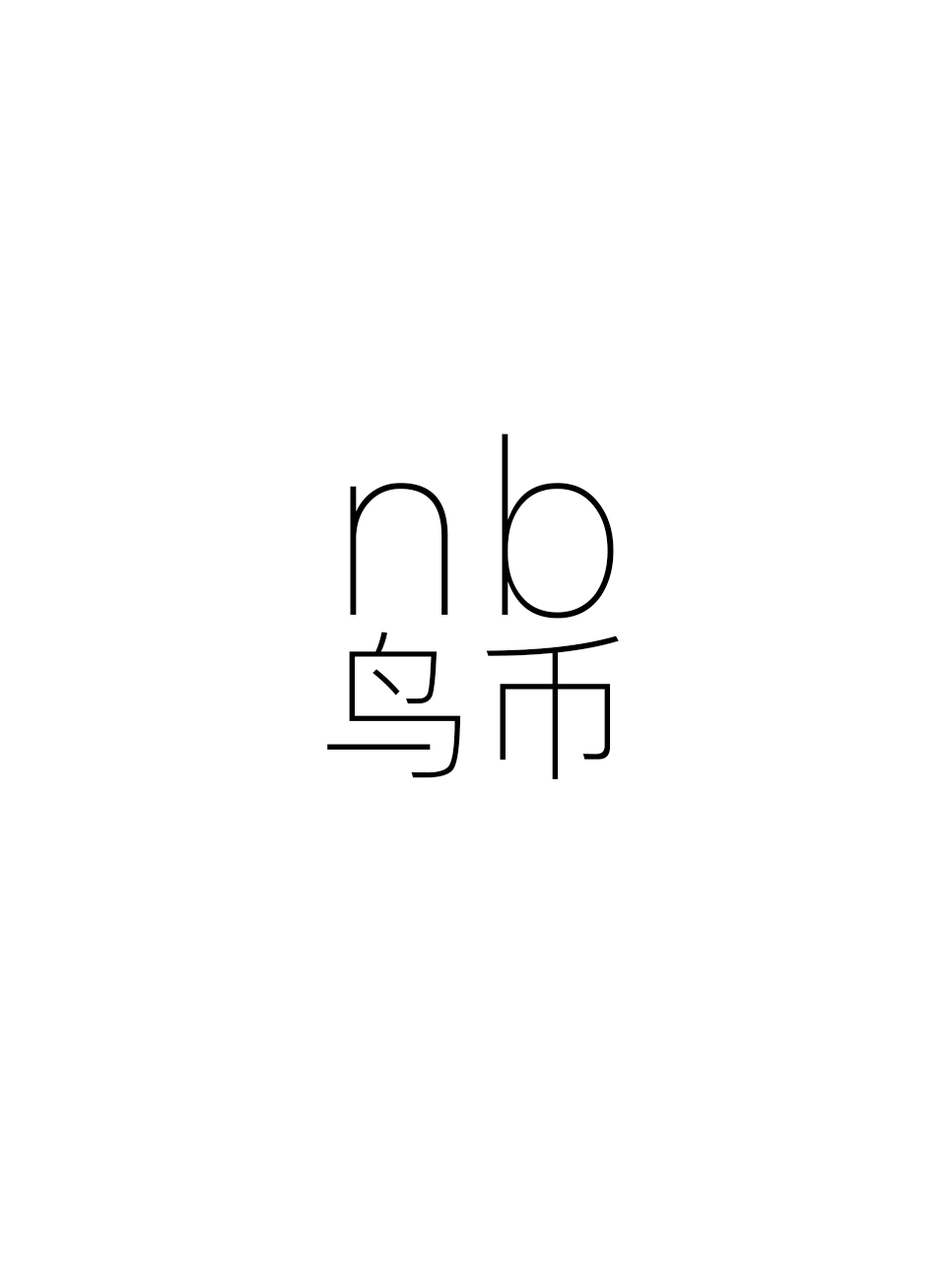
<style>
.page{position:relative;width:946px;height:1261px;background:#ffffff}
.page>*{position:absolute;margin:0}
.t1{font:248.2px "PingFangSC-Ultralight";letter-spacing:0.085em;color:#000000}
.t2{font:159.6px "PingFangSC-Thin";color:#000000}
</style>
<div class="page">
<p class="t1" style="left:350px;top:433px;width:264px;height:186px">nb</p>
<p class="t2" style="left:327px;top:631px;width:292px;height:148px">鸟币</p>
</div>
